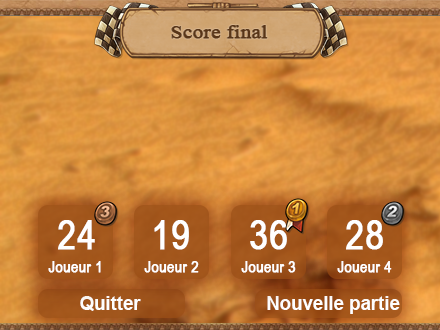
<style>
.page{position:relative;width:440px;height:330px}
.page>*{position:absolute;margin:0}
.t1{font:40px "ArialNarrow";color:#ffffff;font-weight:bold}
.t2{font:16px "ArialNarrow";color:#ffffff;font-weight:bold}
.t3{font:18.7px "Arial-BoldMT";color:#ffffff}
</style>
<div class="page">
<p class="t1" style="left:58px;top:220px;width:37px;height:30px">24</p>
<p class="t1" style="left:154px;top:220px;width:35px;height:30px">19</p>
<p class="t1" style="left:250px;top:220px;width:37px;height:30px">36</p>
<p class="t1" style="left:346px;top:220px;width:37px;height:30px">28</p>
<p class="t2" style="left:48px;top:261px;width:53px;height:12px">Joueur 1</p>
<p class="t2" style="left:144px;top:261px;width:55px;height:12px">Joueur 2</p>
<p class="t2" style="left:241px;top:261px;width:55px;height:12px">Joueur 3</p>
<p class="t2" style="left:337px;top:261px;width:55px;height:12px">Joueur 4</p>
<p class="t3" style="left:80px;top:296px;width:61px;height:15px">Quitter</p>
<p class="t3" style="left:267px;top:296px;width:133px;height:18px">Nouvelle partie</p>
</div>
